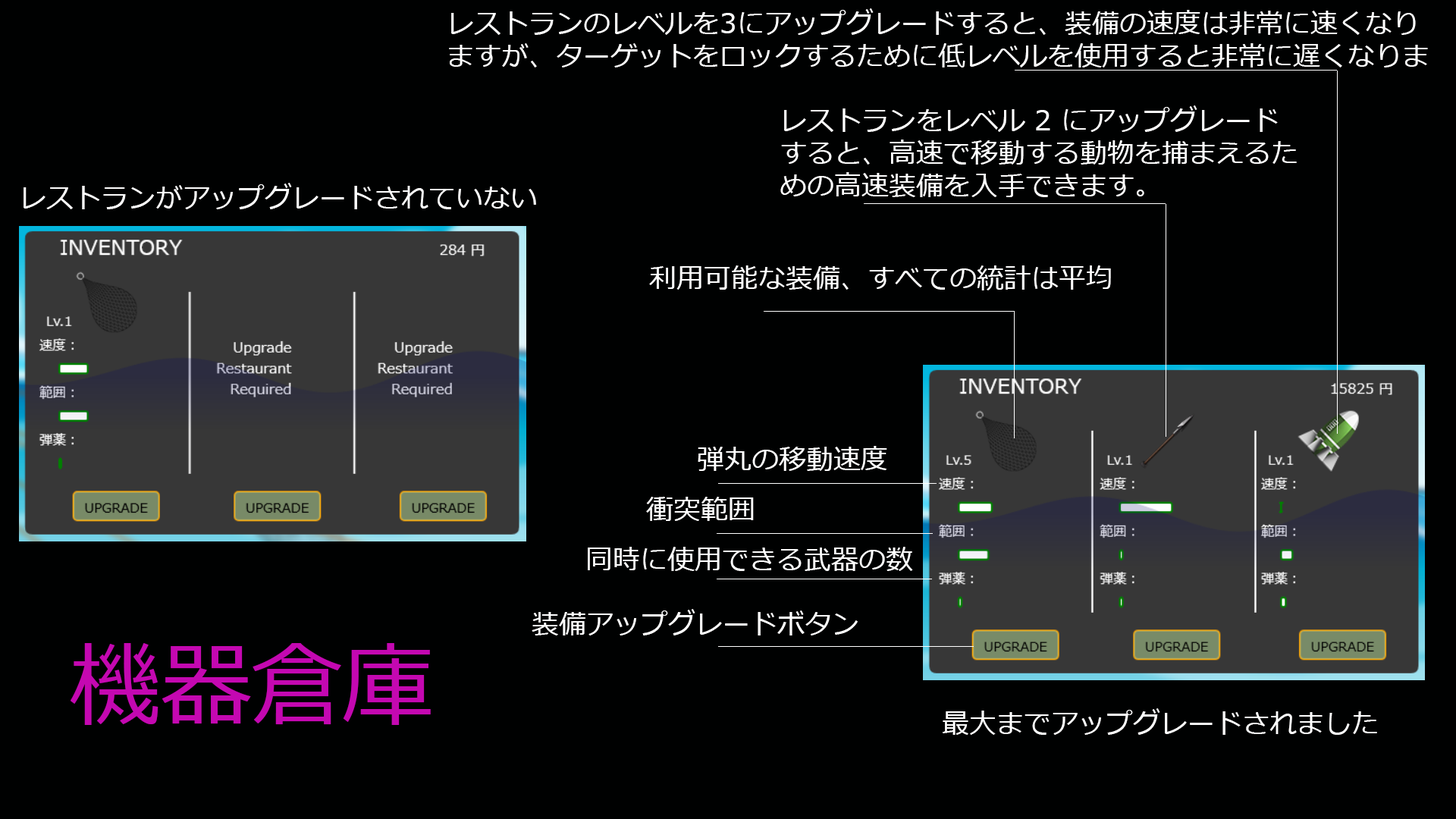
<style>
.page{position:relative;width:1456px;height:819px;background:#000101}
.page>*{position:absolute;margin:0}
.t1{font:27.3px "Meiryo";color:#ffffff}
.t2{font:91px "Meiryo";color:#c408b1}
</style>
<div class="page">
<p class="t1" style="left:449px;top:8px;width:979px;height:59px">レストランのレベルを3にアップグレードすると、装備の速度は非常に速くなりますが、ターゲットをロックするために低レベルを使用すると非常に遅くなります。</p>
<p class="t1" style="left:780px;top:105px;width:517px;height:92px">レストランをレベル 2 にアップグレードすると、高速で移動する動物を捕まえるための高速装備を入手できます。</p>
<p class="t1" style="left:24px;top:183px;width:512px;height:26px">レストランがアップグレードされていない</p>
<p class="t1" style="left:649px;top:265px;width:462px;height:25px">利用可能な装備、すべての統計は平均的です。</p>
<p class="t1" style="left:698px;top:446px;width:189px;height:25px">弾丸の移動速度</p>
<p class="t1" style="left:646px;top:497px;width:108px;height:24px">衝突範囲</p>
<p class="t1" style="left:588px;top:547px;width:325px;height:24px">同時に使用できる武器の数</p>
<p class="t1" style="left:532px;top:609px;width:326px;height:26px">装備アップグレードボタン</p>
<p class="t2" style="left:70px;top:643px;width:361px;height:82px">機器倉庫</p>
<p class="t1" style="left:943px;top:708px;width:434px;height:27px">最大までアップグレードされました</p>
</div>
